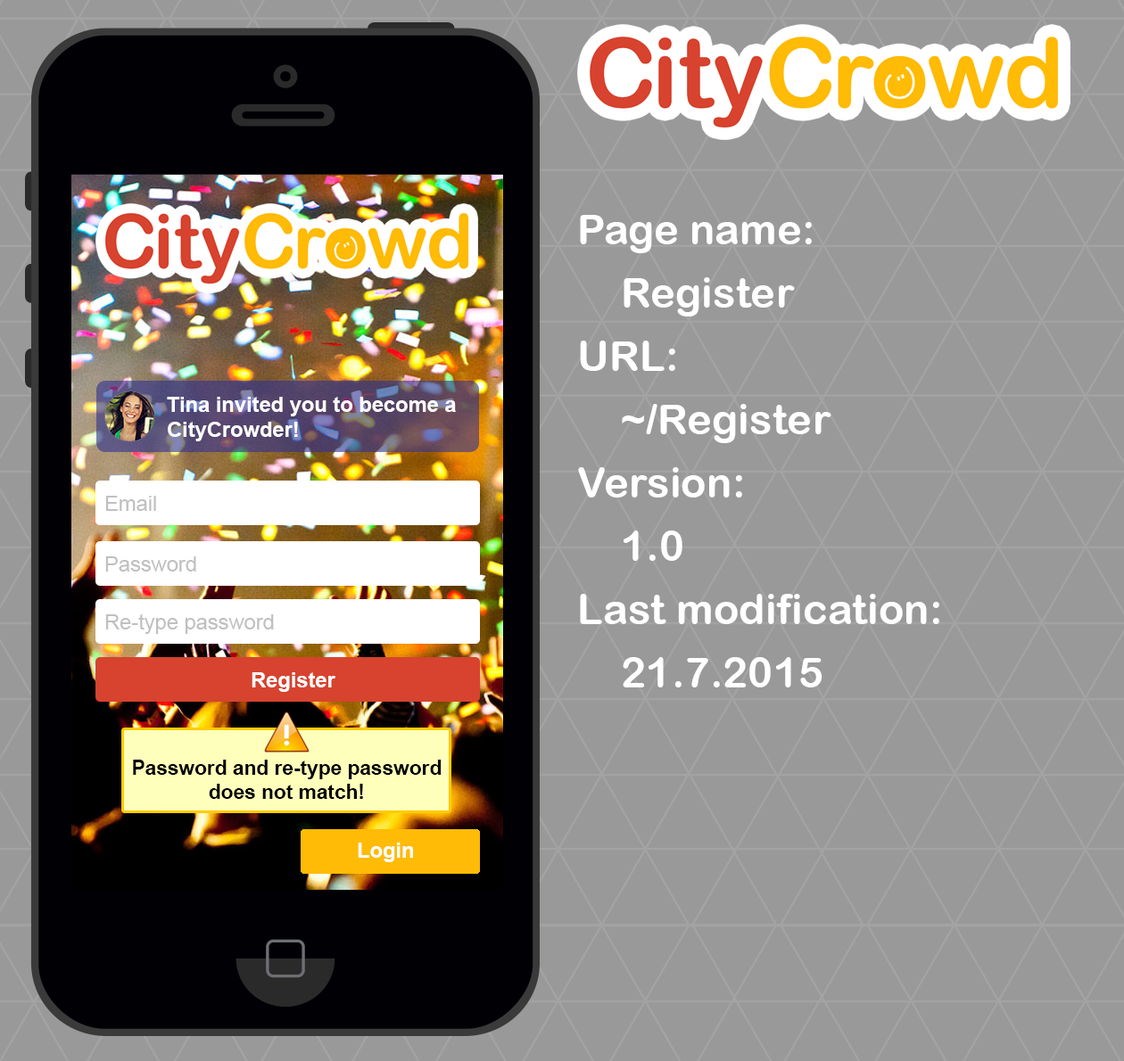
<style>
.page{position:relative;width:1124px;height:1061px;background:#999999}
.page>*{position:absolute;margin:0}
.t1{font:42.2px/63.3px "ArialRoundedMTBold";color:#ffffff}
.t2{font:21.1px "Arial-BoldMT";color:#ffffff}
.t3{font:21.1px "ArialMT";color:#c0c0c0}
.t4{font:20.2px "Arial-BoldMT";color:#000000}
</style>
<div class="page">
<p class="t1" style="left:578px;top:215px;width:361px;height:473px">Page name:<br>Register<br>URL:<br>~/Register<br>Version:<br>1.0<br>Last modification:<br>21.7.2015</p>
<p class="t2" style="left:167px;top:397px;width:289px;height:44px">Tina invited you to become a CityCrowder!</p>
<p class="t3" style="left:105px;top:496px;width:51px;height:15px">Email</p>
<p class="t3" style="left:105px;top:556px;width:91px;height:16px">Password</p>
<p class="t3" style="left:105px;top:614px;width:169px;height:20px">Re-type password</p>
<p class="t2" style="left:251px;top:672px;width:84px;height:20px">Register</p>
<p class="t4" style="left:133px;top:760px;width:308px;height:39px;text-align:center">Password and re-type password does not match!</p>
<p class="t2" style="left:358px;top:843px;width:55px;height:19px">Login</p>
</div>
